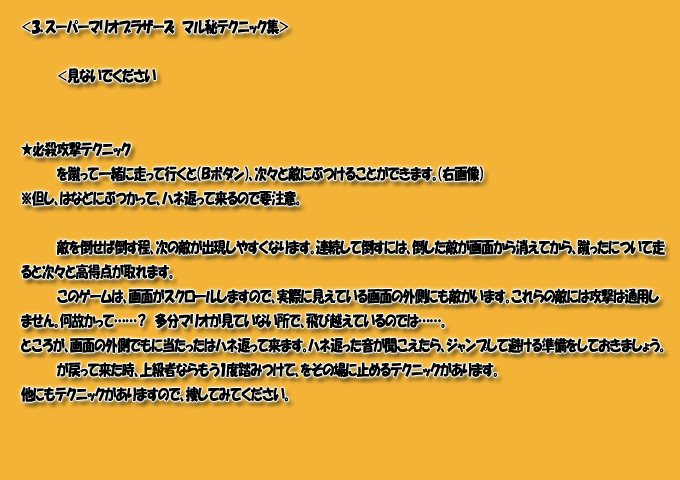
<style>
.page{position:relative;width:680px;height:480px;background:#f3b337}
.page>*{position:absolute;margin:0}
.t1{font:15.4px "HGPSoeiKakupoptai";letter-spacing:-0.015em;color:#000000;scale:0.82 1}
</style>
<div class="page">
<p class="t1" style="left:21px;top:19px;width:644px;height:383px">＜３．スーパーマリオブラザーズ　マル秘テクニック集＞<br><br>  ＜見ないでください<br><br><br>★必殺攻撃テクニック<br> を蹴って一緒に走って行くと（Ｂボタン）、次々と敵にぶつけることができます。（右画像）<br>※但し、はなどにぶつかって、ハネ返って来るので要注意。<br><br> 敵を倒せば倒す程、次の敵が出現しやすくなります。連続して倒すには、倒した敵が画面から消えてから、蹴ったについて走ると次々と高得点が取れます。<br> このゲームは、画面がスクロールしますので、実際に見えている画面の外側にも敵がいます。これらの敵には攻撃は通用しません。何故かって……？　多分マリオが見ていない所で、飛び越えているのでは……。<br>ところが、画面の外側でもに当たったはハネ返って来ます。ハネ返った音が聞こえたら、ジャンプして避ける準備をしておきましょう。<br> が戻って来た時、上級者ならもう１度踏みつけて、をその場に止めるテクニックがあります。<br>他にもテクニックがありますので、捜してみてください。<br><br><br>★連続殺法<br>● 連続して敵を攻撃すると、高得点になります。<br><br>● コインは１枚で２００点。このコインを１００枚取ると、得点だけでなく、マリオが１人増えます。きっと、どこかに、コインがいっぱい詰っている場所があるはずです。捜してみましょう。<br><br><br>★ひみつ<br>● ブロックは１つ割ると５０点になります。いろいろな所をたたいてみましょう。<br>● マリオを増やす方法は、いろいろあります。試してみましょう。<br>● エリアの最後に花火が上がることがあります。１発は５００点です。何発の花火が上がるか、それはひみつです。考えてください。</p>
</div>
